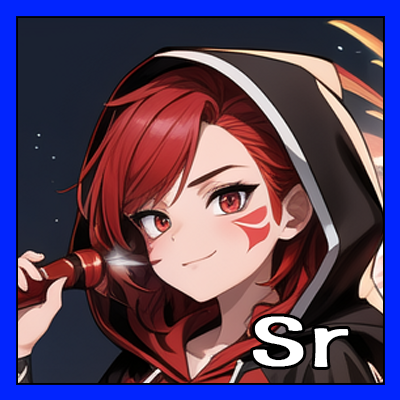
<style>
.page{position:relative;width:400px;height:400px}
.page>*{position:absolute;margin:0}
.t1{font:74.2px "YetR-HM";color:#ffffff;font-weight:bold;scale:1.33 1}
</style>
<div class="page">
<p class="t1" style="left:251px;top:315px;width:99px;height:54px">Sr</p>
</div>
